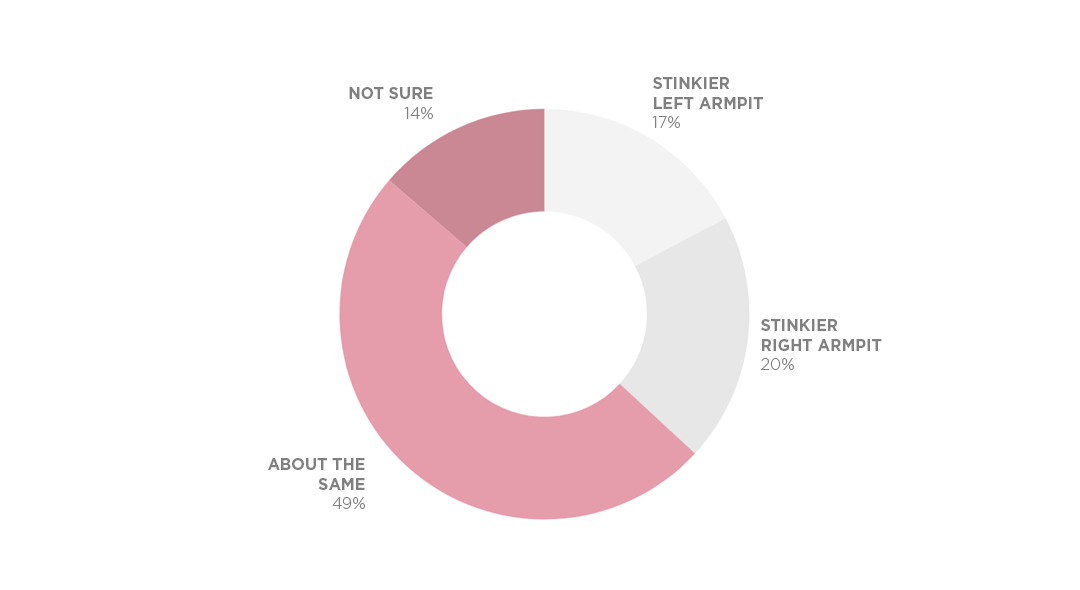
<style>
.page{position:relative;width:1080px;height:590px;background:#ffffff}
.page>*{position:absolute;margin:0}
.t1{font:16px "Gotham-Bold";color:#808080}
.t2{font:16px "Gotham-Light";color:#808080}
</style>
<div class="page">
<p class="t1" style="left:652px;top:77px;width:111px;height:51px;text-align:right">STINKIER <br>LEFT ARMPIT<br><span class="t2">17%</span></p>
<p class="t1" style="left:349px;top:87px;width:84px;height:32px">NOT SURE<br><span class="t2">14%</span></p>
<p class="t1" style="left:761px;top:319px;width:121px;height:51px;text-align:right">STINKIER <br>RIGHT ARMPIT<br><span class="t2">20%</span></p>
<p class="t1" style="left:268px;top:458px;width:97px;height:51px">ABOUT THE<br>SAME<br><span class="t2">49%</span></p>
</div>
